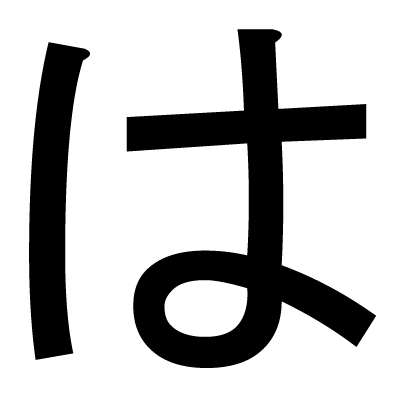
<style>
.page{position:relative;width:400px;height:400px;background:#ffffff}
.page>*{position:absolute;margin:0}
.t1{font:416.7px "MS-PGothic";color:#000000}
</style>
<div class="page">
<p class="t1" style="left:29px;top:29px;width:347px;height:339px">は</p>
</div>
